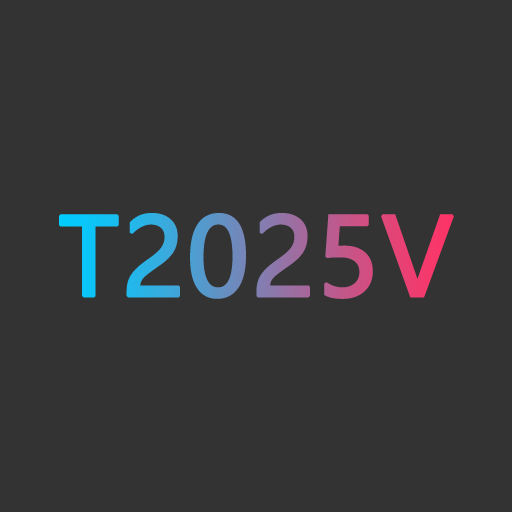
<style>
.page{position:relative;width:512px;height:512px;background:#333333}
.page>*{position:absolute;margin:0}
.t1{font:105.9px "MicrosoftYaHei";font-weight:bold}
</style>
<div class="page">
<p class="t1" style="left:59px;top:213px;width:395px;height:86px">T2025V</p>
</div>
